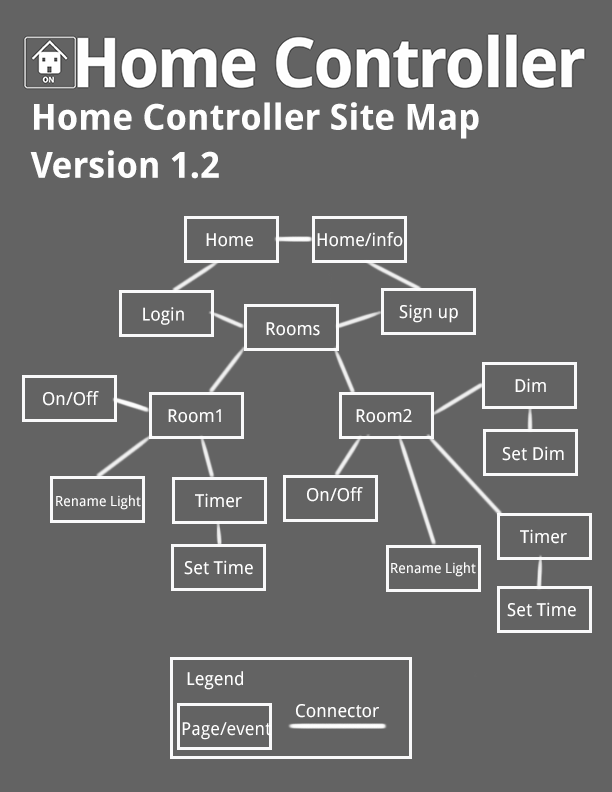
<style>
.page{position:relative;width:612px;height:792px;background:#636363}
.page>*{position:absolute;margin:0}
.t1{font:36px/24px "DroidSans-Bold";color:#fefefe}
.t2{font:18px "DroidSans";color:#fefefe}
.t3{font:14px "DroidSans";color:#fefefe}
.t4{font:18px "DroidSans";color:#ffffff}
</style>
<div class="page">
<p class="t1" style="left:30px;top:102px;width:449px;height:77px">Home Controller Site Map<br><br>Version 1.2</p>
<p class="t2" style="left:206px;top:233px;width:47px;height:14px">Home</p>
<p class="t2" style="left:317px;top:232px;width:86px;height:15px">Home/info</p>
<p class="t2" style="left:399px;top:304px;width:59px;height:19px">Sign up</p>
<p class="t2" style="left:143px;top:307px;width:41px;height:18px">Login</p>
<p class="t2" style="left:266px;top:322px;width:54px;height:14px">Rooms</p>
<p class="t2" style="left:515px;top:378px;width:31px;height:14px">Dim</p>
<p class="t2" style="left:43px;top:391px;width:56px;height:15px">On/Off</p>
<p class="t2" style="left:168px;top:409px;width:53px;height:14px">Room1</p>
<p class="t2" style="left:356px;top:409px;width:56px;height:14px">Room2</p>
<p class="t2" style="left:502px;top:446px;width:62px;height:15px">Set Dim</p>
<p class="t3" style="left:56px;top:495px;width:85px;height:15px">Rename Light</p>
<p class="t2" style="left:195px;top:493px;width:47px;height:15px">Timer</p>
<p class="t2" style="left:307px;top:487px;width:56px;height:15px">On/Off</p>
<p class="t2" style="left:520px;top:529px;width:47px;height:15px">Timer</p>
<p class="t2" style="left:184px;top:560px;width:69px;height:15px">Set Time</p>
<p class="t3" style="left:391px;top:562px;width:85px;height:15px">Rename Light</p>
<p class="t2" style="left:507px;top:602px;width:69px;height:15px">Set Time</p>
<p class="t2" style="left:187px;top:671px;width:56px;height:19px">Legend</p>
<p class="t4" style="left:296px;top:704px;width:83px;height:14px">Connector</p>
</div>
